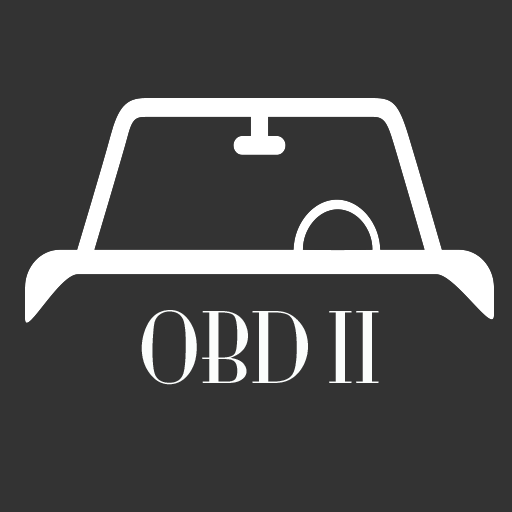
<style>
.page{position:relative;width:512px;height:512px;background:#333333}
.page>*{position:absolute;margin:0}
.t1{font:91px "MonaLisaSolidITCTT";color:#fbfdfc}
</style>
<div class="page">
<p class="t1" style="left:141px;top:310px;width:238px;height:75px">OBD II</p>
</div>
